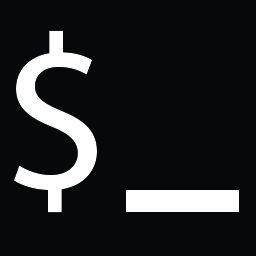
<style>
.page{position:relative;width:256px;height:256px;background:#070809}
.page>*{position:absolute;margin:0}
.t1{font:220px "MyriadPro-Regular";color:#ffffff}
</style>
<div class="page">
<p class="t1" style="left:14px;top:30px;width:83px;height:183px">$</p>
</div>
